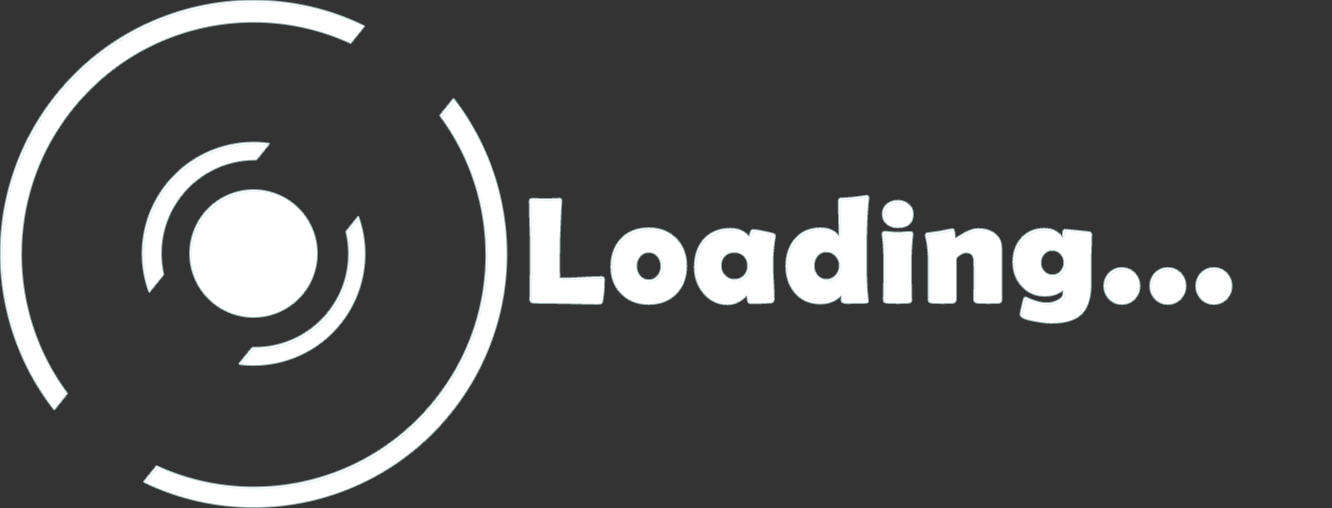
<style>
.page{position:relative;width:1332px;height:508px;background:#333333}
.page>*{position:absolute;margin:0}
.t1{font:150px "BerlinSansFBDemi-Bold";color:#ffffff;font-weight:bold}
</style>
<div class="page">
<p class="t1" style="left:529px;top:195px;width:703px;height:128px">Loading...</p>
</div>
